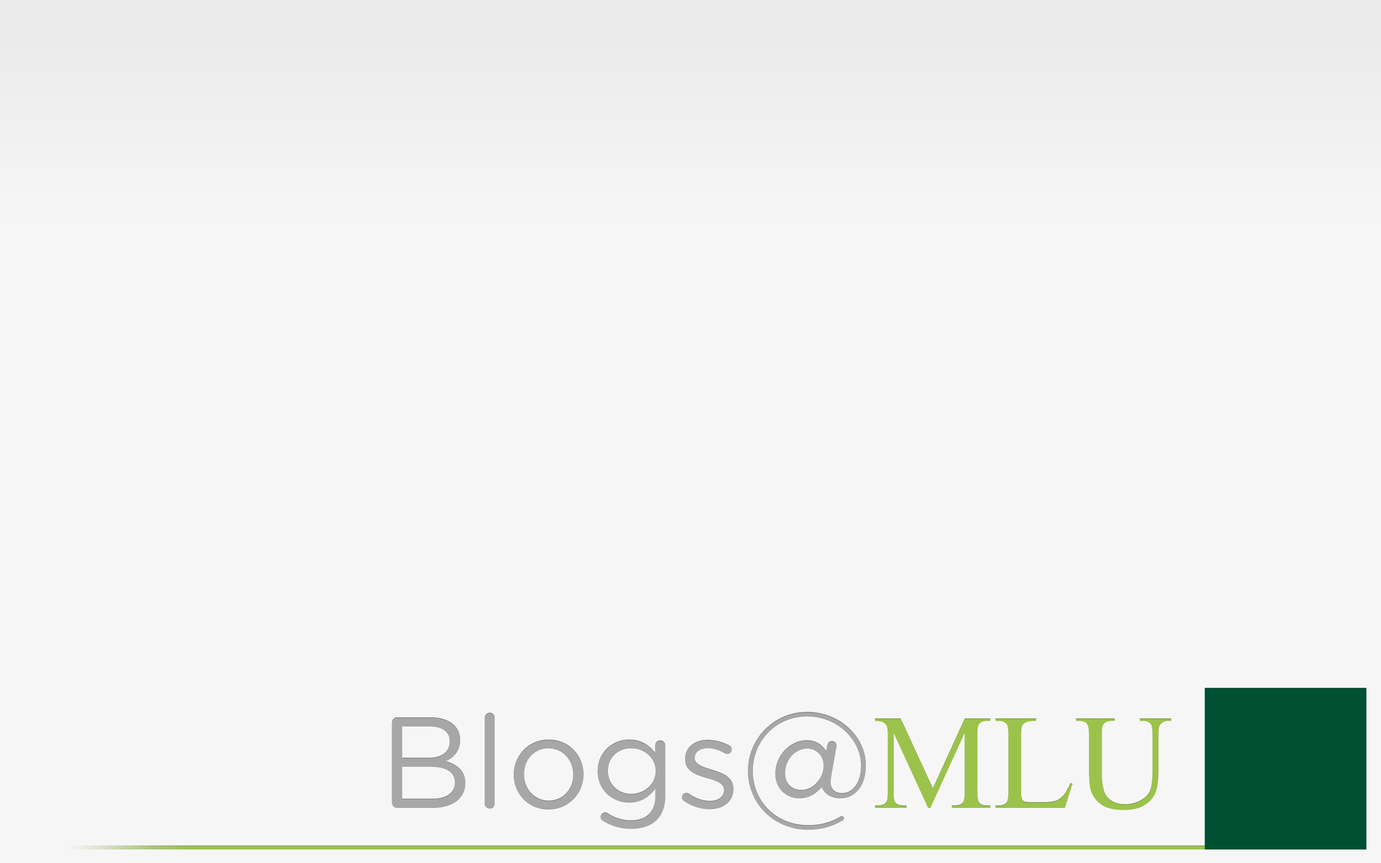
<style>
.page{position:relative;width:1381px;height:863px;background:#f6f6f6}
.page>*{position:absolute;margin:0}
.t1{font:129.5px "GothamRounded-Book";color:#a7a7a7}
.t2{font:134.9px "GothamRounded-Book";color:#a7a7a7}
.t3{font:134.9px "TimesNewRomanPSMT";color:#9bc34b}
</style>
<div class="page">
<p class="t1" style="left:392px;top:712px;width:780px;height:118px">Blogs<span class="t2">@</span><span class="t3">MLU</span></p>
</div>
